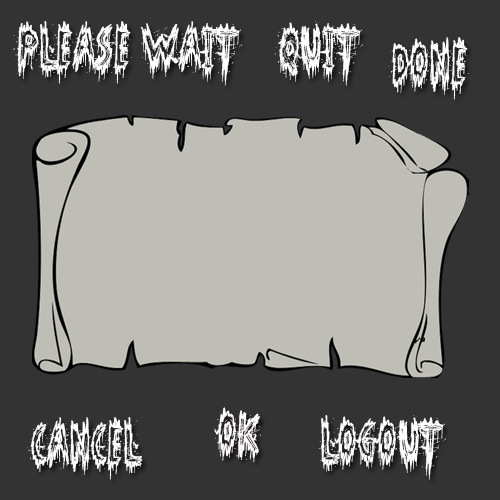
<style>
.page{position:relative;width:500px;height:500px;background:#333333}
.page>*{position:absolute;margin:0}
.t1{font:48px "Phantom-Ghost";color:#fdfcfc}
</style>
<div class="page">
<p class="t1" style="left:13px;top:21px;width:229px;height:65px">Please Wait</p>
<p class="t1" style="left:274px;top:21px;width:89px;height:65px">Quit</p>
<p class="t1" style="left:388px;top:37px;width:81px;height:63px">done</p>
<p class="t1" style="left:214px;top:407px;width:47px;height:56px">ok</p>
<p class="t1" style="left:27px;top:417px;width:116px;height:63px">Cancel</p>
<p class="t1" style="left:318px;top:415px;width:128px;height:65px">logout</p>
</div>
